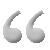
<style>
.page{position:relative;width:50px;height:50px;background:#ffffff}
.page>*{position:absolute;margin:0}
.t1{font:96px "Georgia-Bold"}
</style>
<div class="page">
<p class="t1" style="left:3px;top:10px;width:42px;height:33px">“</p>
</div>
